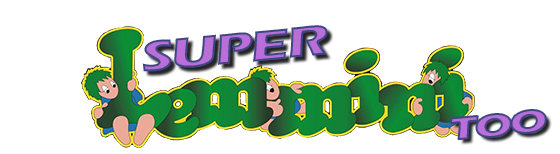
<style>
.page{position:relative;width:560px;height:154px;background:#ffffff}
.page>*{position:absolute;margin:0}
.t1{font:45px "ErasITC-Bold";letter-spacing:-0.05em;scale:1.34 1}
.t2{font:32.1px "ErasITC-Bold";letter-spacing:-0.05em;color:#b96ed8;scale:1.34 1}
</style>
<div class="page">
<p class="t1" style="left:142px;top:25px;width:186px;height:47px;rotate:-5deg">SUPER</p>
<p class="t2" style="left:451px;top:110px;width:95px;height:30px;rotate:-5deg">TOO</p>
</div>
